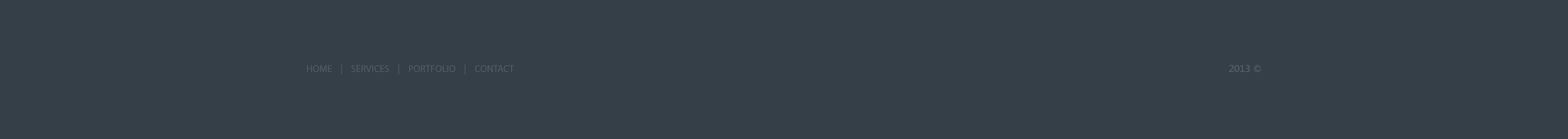
<style>
.page{position:relative;width:1568px;height:139px;background:#353f47}
.page>*{position:absolute;margin:0}
.t1{font:9.8px "MyriadPro-Regular";color:#515f67;text-transform:uppercase}
.t2{font:9.8px "SegoeUI-SemiBold";color:#515f67;text-transform:uppercase}
</style>
<div class="page">
<p class="t1" style="left:307px;top:65px;width:207px;height:9px">home    |    services    |    portfolio    |    contact</p>
<p class="t2" style="left:1229px;top:65px;width:32px;height:8px">2013 ©</p>
</div>
